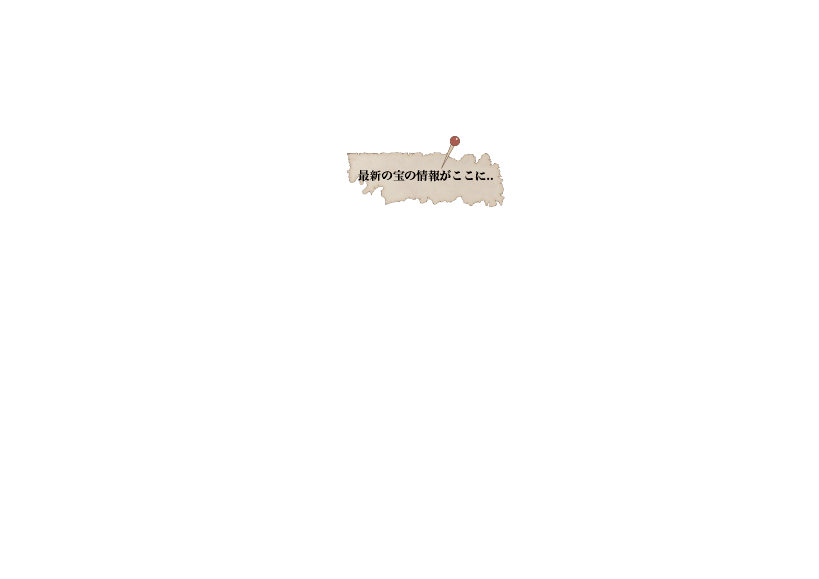
<style>
.page{position:relative;width:819px;height:579px;background:#ffffff}
.page>*{position:absolute;margin:0}
.t1{font:11.7px "HiraMinPro-W6";color:#000000}
</style>
<div class="page">
<p class="t1" style="left:358px;top:170px;width:135px;height:12px">最新の宝の情報がここに..</p>
</div>
